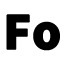
<style>
.page{position:relative;width:64px;height:64px;background:#ffffff}
.page>*{position:absolute;margin:0}
.t1{font:45.5px "SourceHanSansSC-Heavy";color:#000000;font-weight:bold}
</style>
<div class="page">
<p class="t1" style="left:6px;top:14px;width:54px;height:37px">Fo</p>
</div>
